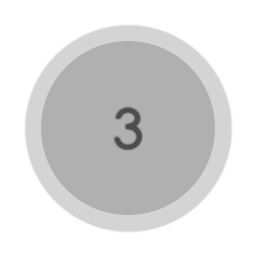
<style>
.page{position:relative;width:256px;height:256px;background:#ffffff}
.page>*{position:absolute;margin:0}
.t1{font:53.9px "CenturyGothic";color:#4d4d4d}
</style>
<div class="page">
<p class="t1" style="left:114px;top:108px;width:28px;height:41px">3</p>
</div>
